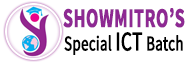
<style>
.page{position:relative;width:188px;height:62px;background:#ffffff}
.page>*{position:absolute;margin:0}
.t1{font:27px "SourceSansPro-Bold";color:#8e2993;font-weight:bold;scale:0.67 1}
.t2{font:21px "SourceSansPro-Regular";color:#000000;font-weight:bold;scale:0.71 1}
.t3{font:27px "SourceSansPro-Regular";color:#000000;font-weight:bold;scale:0.71 1}
</style>
<div class="page">
<p class="t1" style="left:63px;top:8px;width:122px;height:20px">SHOWMITRO’S</p>
<p class="t2" style="left:64px;top:32px;width:119px;height:23px">Special <span class="t3">ICT</span> Batch</p>
</div>
